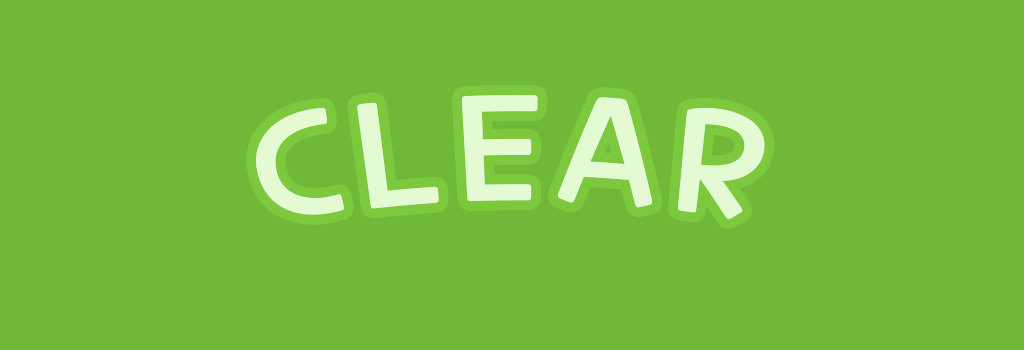
<style>
.page{position:relative;width:1024px;height:350px;background:#71b839}
.page>*{position:absolute;margin:0}
.t1{font:138.1px "CookieRun-Regular";letter-spacing:0.09em;color:#e4fad3}
</style>
<div class="page">
<p class="t1" style="left:256px;top:95px;width:509px;height:125px">CLEAR</p>
</div>
